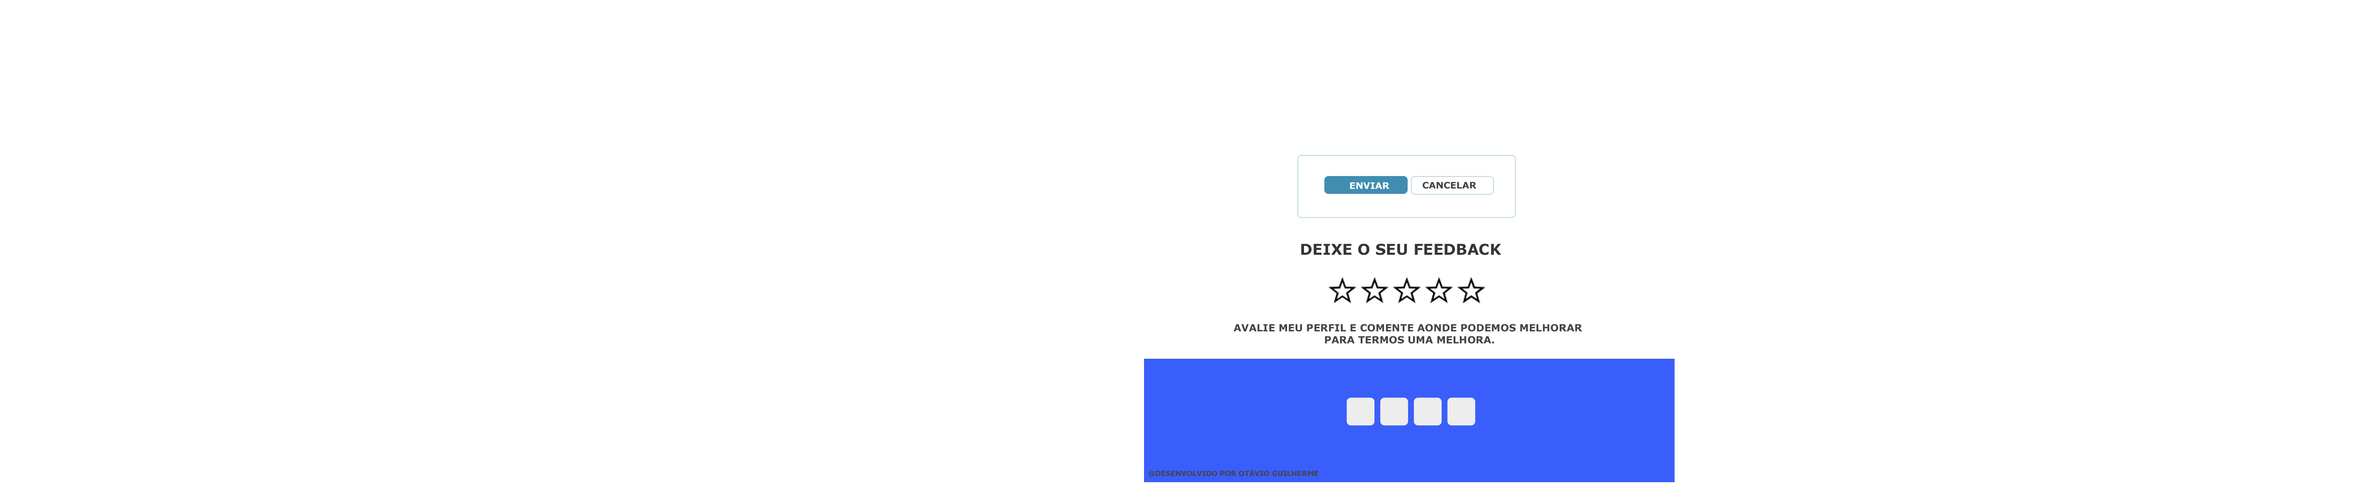
<style>
.page{position:relative;width:2361px;height:483px;background:#ffffff}
.page>*{position:absolute;margin:0}
.t1{font:9px "Verdana-Bold";color:#ffffff}
.t2{font:9px "Verdana-Bold";color:#424141}
.t3{font:14.9px "Verdana-Bold";color:#353535}
.t4{font:9.9px "Verdana-Bold";color:#444444}
.t5{font:6.9px "Verdana-Bold";color:#444444}
</style>
<div class="page">
<p class="t1" style="left:1350px;top:182px;width:39px;height:7px">ENVIAR</p>
<p class="t2" style="left:1422px;top:182px;width:54px;height:7px">CANCELAR</p>
<p class="t3" style="left:1301px;top:244px;width:200px;height:11px">DEIXE O SEU FEEDBACK</p>
<p class="t4" style="left:1233px;top:324px;width:349px;height:20px;text-align:center">AVALIE MEU PERFIL E COMENTE AONDE PODEMOS MELHORAR <br>PARA TERMOS UMA MELHORA.</p>
<p class="t5" style="left:1149px;top:469px;width:169px;height:8px">@DESENVOLVIDO POR OTÁVIO GUILHERME</p>
</div>
